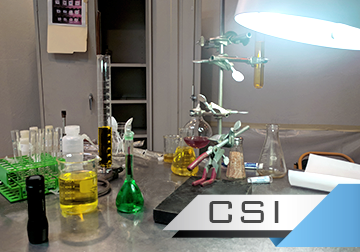
<style>
.page{position:relative;width:360px;height:252px}
.page>*{position:absolute;margin:0}
.t1{font:42.6px "BankGothicBT-Light";color:#494949}
</style>
<div class="page">
<p class="t1" style="left:209px;top:201px;width:70px;height:22px">CSI</p>
</div>
